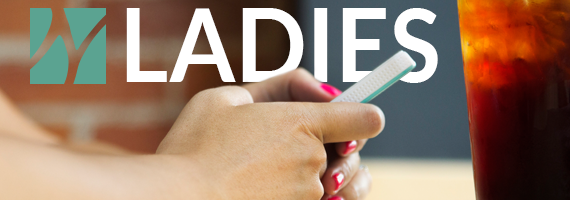
<style>
.page{position:relative;width:570px;height:200px}
.page>*{position:absolute;margin:0}
.t1{font:101.6px "Lato-Bold";color:#ffffff;text-transform:uppercase;scale:0.93 1}
</style>
<div class="page">
<p class="t1" style="left:126px;top:8px;width:312px;height:75px">ladies</p>
</div>
